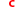
<style>
.page{position:relative;width:16px;height:16px;background:#ffffff}
.page>*{position:absolute;margin:0}
.t1{font:10px "MyriadPro-Bold";color:#fe0006}
</style>
<div class="page">
<p class="t1" style="left:9px;top:0px;width:6px;height:7px">C</p>
</div>
